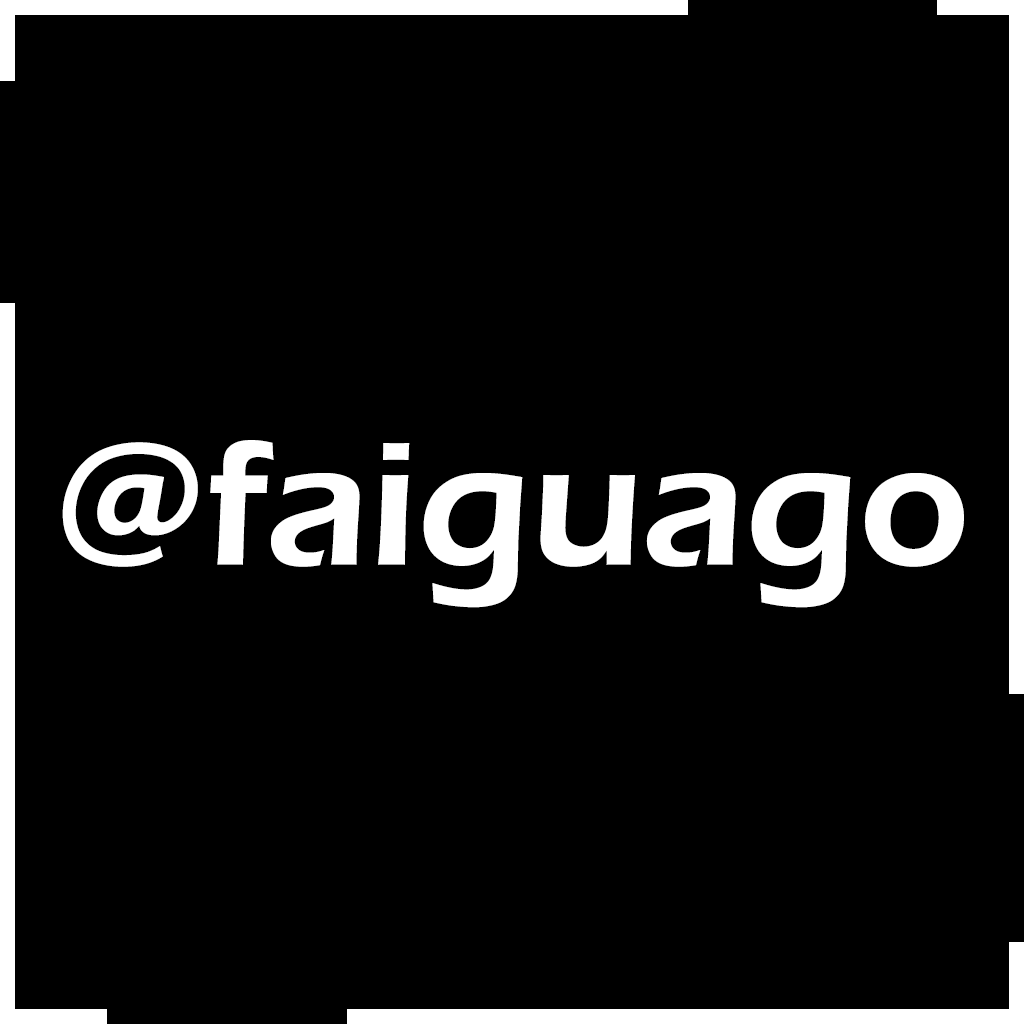
<style>
.page{position:relative;width:1024px;height:1024px;background:#000000}
.page>*{position:absolute;margin:0}
.t1{font:180px "ErasITC-Demi";color:#ffffff}
</style>
<div class="page">
<p class="t1" style="left:62px;top:440px;width:902px;height:168px">@faiguago</p>
</div>
